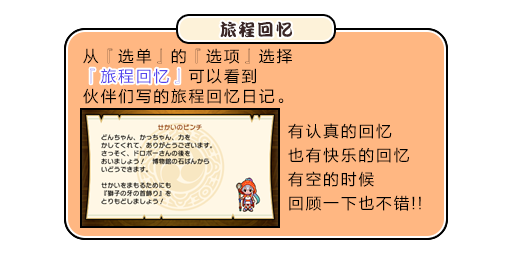
<style>
.page{position:relative;width:512px;height:256px;background:#ffffff}
.page>*{position:absolute;margin:0}
.t1{font:17px "DFPKanTingLiuW9";letter-spacing:0.1em;color:#3b2626}
.t2{font:16px/20px "FZLTHJW--GB1-0";letter-spacing:0.1em;color:#000000}
.t3{font:16px/20px "FZLTHJW--GB1-0";letter-spacing:0.1em;color:#5444ed}
.t4{font:16px "FZLTHJW--GB1-0";letter-spacing:0.1em;color:#5444ed}
.t5{font:16px/24px "FZLTHJW--GB1-0";letter-spacing:0.1em;color:#000000}
</style>
<div class="page">
<p class="t1" style="left:220px;top:21px;width:72px;height:17px">旅程回忆</p>
<p class="t2" style="left:83px;top:48px;width:209px;height:56px">从『选单』的『选项』选择<br><span class="t3">『旅程回忆』</span>可以看到<br>伙伴们写的旅程回忆日记。</p>
<p class="t4" style="left:90px;top:68px;width:90px;height:16px">『旅程回忆』</p>
<p class="t5" style="left:288px;top:123px;width:133px;height:88px">有认真的回忆<br>也有快乐的回忆<br>有空的时候<br>回顾一下也不错!!</p>
</div>
